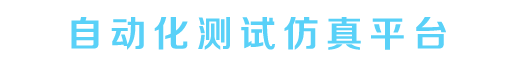
<style>
.page{position:relative;width:509px;height:63px;background:#ffffff}
.page>*{position:absolute;margin:0}
.t1{font:36px "FZZZHONGJW--GB1-0";letter-spacing:0.2em;color:#59d1f8}
</style>
<div class="page">
<p class="t1" style="left:71px;top:17px;width:375px;height:33px">自动化测试仿真平台</p>
</div>
